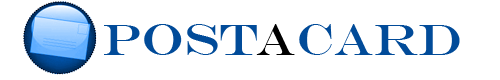
<style>
.page{position:relative;width:500px;height:80px;background:#ffffff}
.page>*{position:absolute;margin:0}
.t1{font:45px "EngraversMT";color:#014b99}
.t2{font:45px "EngraversMT";color:#000000}
</style>
<div class="page">
<p class="t1" style="left:104px;top:24px;width:356px;height:31px">POST<span class="t2">A</span>CARD</p>
</div>
